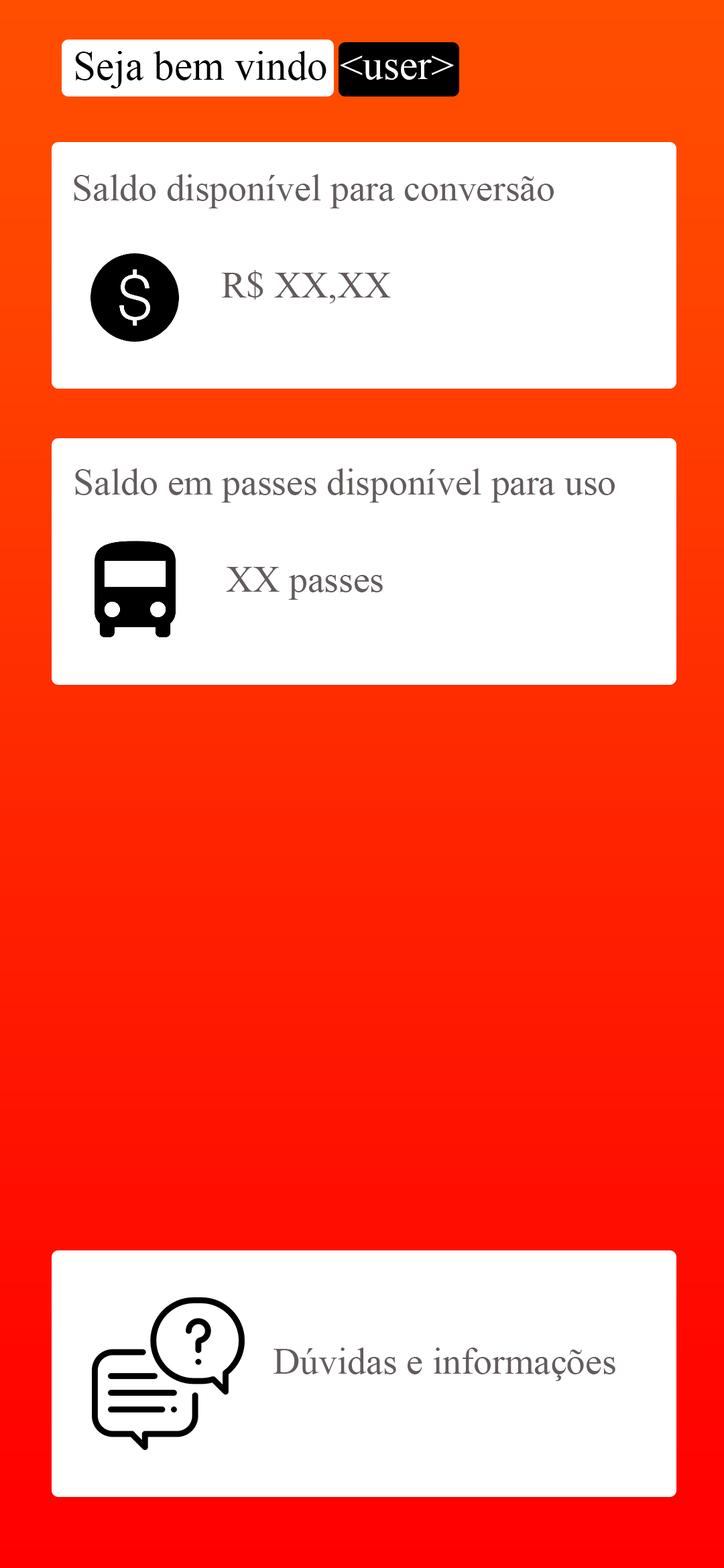
<style>
.page{position:relative;width:724px;height:1568px;background:#ffffff}
.page>*{position:absolute;margin:0}
.t1{font:40.9px "TimesNewRomanPSMT";color:#000000}
.t2{font:40.9px "TimesNewRomanPSMT";color:#ffffff}
.t3{font:37.2px "TimesNewRomanPSMT";color:#645c5c}
</style>
<div class="page">
<p class="t1" style="left:75px;top:51px;width:251px;height:37px">Seja bem vindo</p>
<p class="t2" style="left:340px;top:56px;width:114px;height:24px">&lt;user&gt;</p>
<p class="t3" style="left:74px;top:174px;width:479px;height:34px">Saldo disponível para conversão</p>
<p class="t3" style="left:221px;top:270px;width:170px;height:34px">R$ XX,XX</p>
<p class="t3" style="left:75px;top:468px;width:539px;height:35px">Saldo em passes disponível para uso</p>
<p class="t3" style="left:226px;top:567px;width:157px;height:33px">XX passes</p>
<p class="t3" style="left:273px;top:1348px;width:342px;height:33px">Dúvidas e informações</p>
</div>
